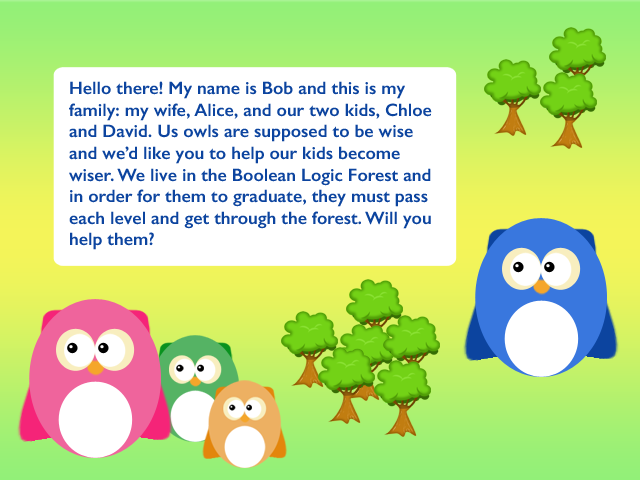
<style>
.page{position:relative;width:640px;height:480px;background:#ffffff}
.page>*{position:absolute;margin:0}
.t1{font:18px "GillSans-SemiBold";color:#0c449f}
</style>
<div class="page">
<p class="t1" style="left:69px;top:81px;width:363px;height:169px">Hello there! My name is Bob and this is my family: my wife, Alice, and our two kids, Chloe and David. Us owls are supposed to be wise and we’d like you to help our kids become wiser. We live in the Boolean Logic Forest and in order for them to graduate, they must pass each level and get through the forest. Will you help them?</p>
</div>
